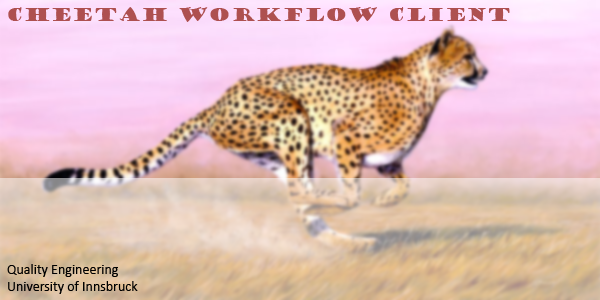
<style>
.page{position:relative;width:600px;height:300px}
.page>*{position:absolute;margin:0}
.t1{font:18px "GoudyStout";color:#ae5050}
.t2{font:14px "Calibri";color:#000000}
</style>
<div class="page">
<p class="t1" style="left:8px;top:7px;width:502px;height:15px">CHEETAH Workflow Client</p>
<p class="t2" style="left:7px;top:264px;width:131px;height:30px">Quality Engineering<br>University of Innsbruck</p>
</div>
